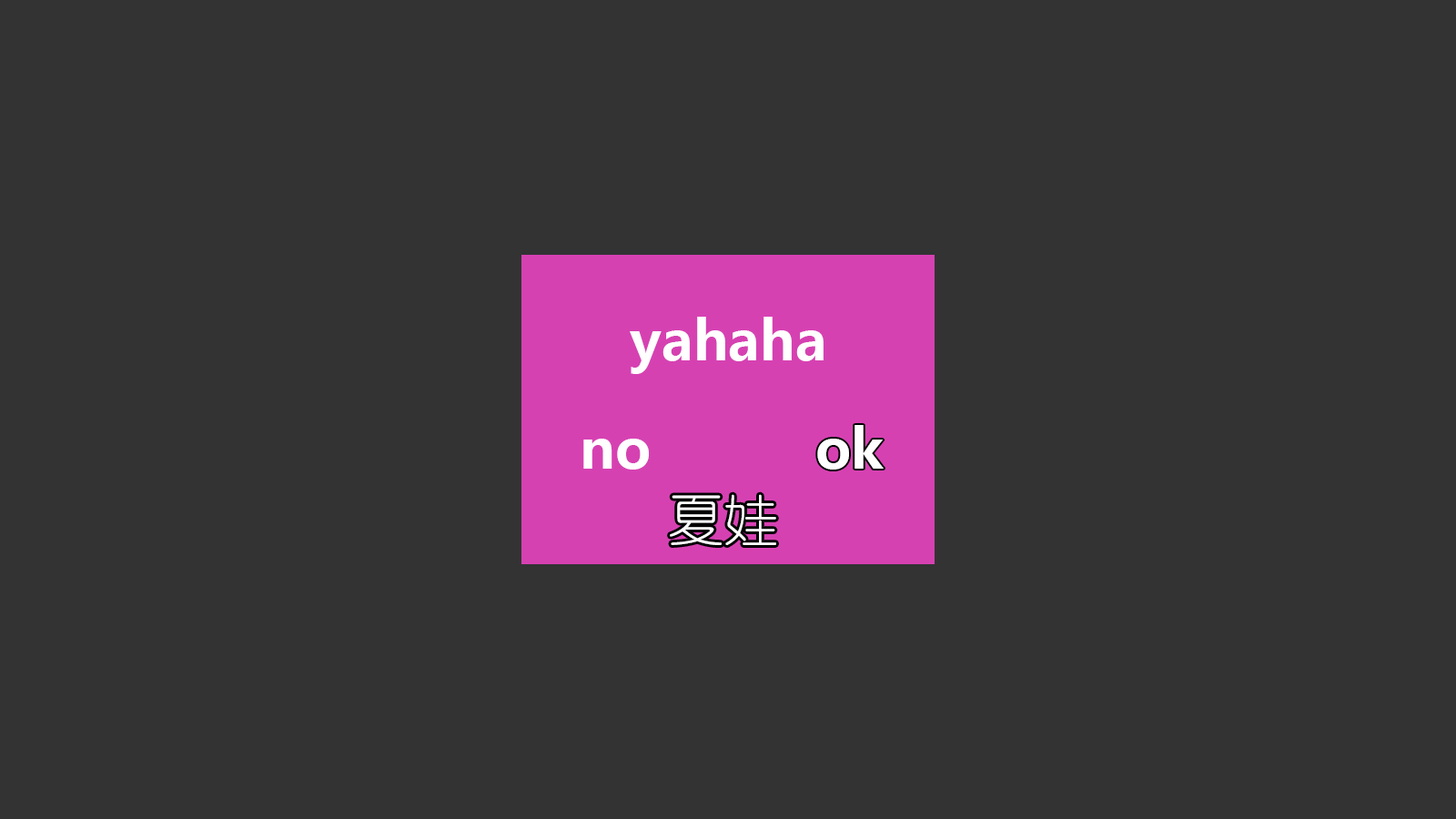
<style>
.page{position:relative;width:1456px;height:819px;background:#333333}
.page>*{position:absolute;margin:0}
.t1{font:54.6px "MicrosoftYaHei-Bold";color:#ffffff}
.t2{font:54.6px "YouYuan";color:#ffffff}
</style>
<div class="page">
<p class="t1" style="left:630px;top:317px;width:194px;height:57px">yahaha</p>
<p class="t1" style="left:817px;top:425px;width:67px;height:45px">ok</p>
<p class="t1" style="left:583px;top:439px;width:66px;height:31px">no</p>
<p class="t2" style="left:670px;top:494px;width:106px;height:51px">夏娃</p>
</div>
